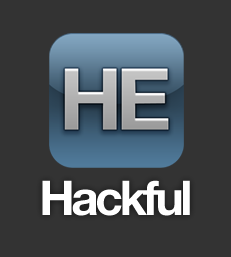
<style>
.page{position:relative;width:231px;height:257px;background:#333333}
.page>*{position:absolute;margin:0}
.t1{font:48px "HelveticaNeue-Bold";letter-spacing:-0.075em;color:#ffffff}
</style>
<div class="page">
<p class="t1" style="left:42px;top:180px;width:148px;height:36px">Hackful</p>
</div>
